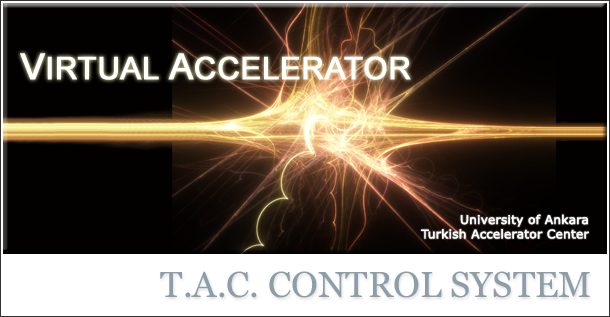
<style>
.page{position:relative;width:610px;height:317px;background:#020100}
.page>*{position:absolute;margin:0}
.t1{font:31px "ArialMT";color:#ffffff;text-transform:uppercase;font-weight:bold}
.t2{font:36px "ArialMT";color:#ffffff;text-transform:uppercase;font-weight:bold}
.t3{font:12px "Verdana";color:#ffffff;font-weight:bold}
</style>
<div class="page">
<p class="t1" style="left:20px;top:53px;width:391px;height:27px"><span class="t2">V</span>irtual<span class="t2"> A</span>ccelerator</p>
<p class="t3" style="left:421px;top:214px;width:168px;height:25px;text-align:right">University of Ankara<br>Turkish Accelerator Center</p>
</div>
